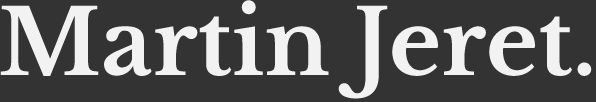
<style>
.page{position:relative;width:596px;height:102px;background:#333333}
.page>*{position:absolute;margin:0}
.t1{font:90px "LibreBaskerville-Bold";color:#f2f2f2}
</style>
<div class="page">
<p class="t1" style="left:0px;top:0px;width:592px;height:99px">Martin Jeret.</p>
</div>
